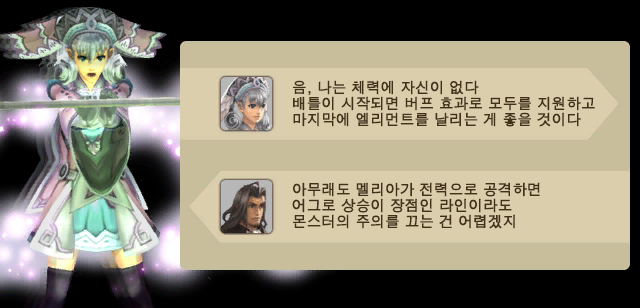
<style>
.page{position:relative;width:640px;height:308px;background:#000000}
.page>*{position:absolute;margin:0}
.t1{font:14.7px/16px "H2gtrM";letter-spacing:-0.025em;color:#423119;font-weight:bold}
.t2{font:16px/18.7px "H2gtrM";letter-spacing:-0.025em;color:#ffffff;font-weight:bold}
</style>
<div class="page">
<p class="t1" style="left:293px;top:80px;width:302px;height:47px">음, 나는 체력에 자신이 없다<br>배틀이 시작되면 버프 효과로 모두를 지원하고<br>마지막에 엘리먼트를 날리는 게 좋을 것이다</p>
<p class="t1" style="left:292px;top:182px;width:248px;height:47px">아무래도 멜리아가 전력으로 공격하면<br>어그로 상승이 장점인 라인이라도<br>몬스터의 주의를 끄는 건 어렵겠지<br><span class="t2"><br>배회하고 있습니다</span></p>
</div>
